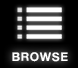
<style>
.page{position:relative;width:78px;height:68px;background:#000000}
.page>*{position:absolute;margin:0}
.t1{font:12.1px "AlteHaasGrotesk_Bold";letter-spacing:0.05em;color:#ffffff}
</style>
<div class="page">
<p class="t1" style="left:12px;top:52px;width:56px;height:10px">BROWSE</p>
</div>
